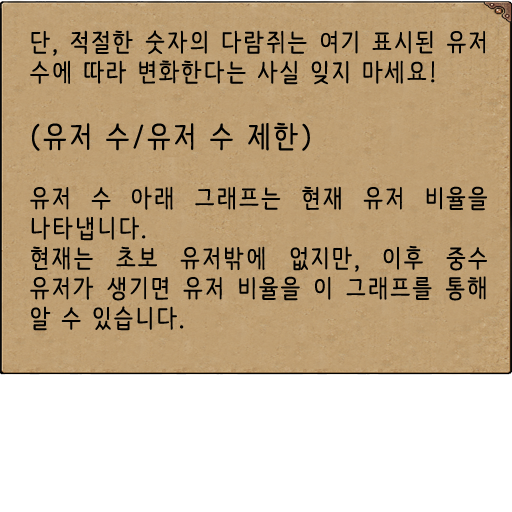
<style>
.page{position:relative;width:512px;height:512px;background:#ffffff}
.page>*{position:absolute;margin:0}
.t1{font:25px "NanumBarunpen";letter-spacing:0.075em;color:#000000;font-weight:bold}
.t2{font:30px "NanumBarunpen";letter-spacing:0.075em;color:#000000;font-weight:bold}
</style>
<div class="page">
<p class="t1" style="left:30px;top:30px;width:457px;height:301px;text-align:justify">단, 적절한 숫자의 다람쥐는 여기 표시된 유저 수에 따라 변화한다는 사실 잊지 마세요!<br> <br><span class="t2">(유저 수/유저 수 제한)<br></span><br>유저 수 아래 그래프는 현재 유저 비율을 나타냅니다.<br>현재는 초보 유저밖에 없지만, 이후 중수 유저가 생기면 유저 비율을 이 그래프를 통해 알 수 있습니다.</p>
</div>
